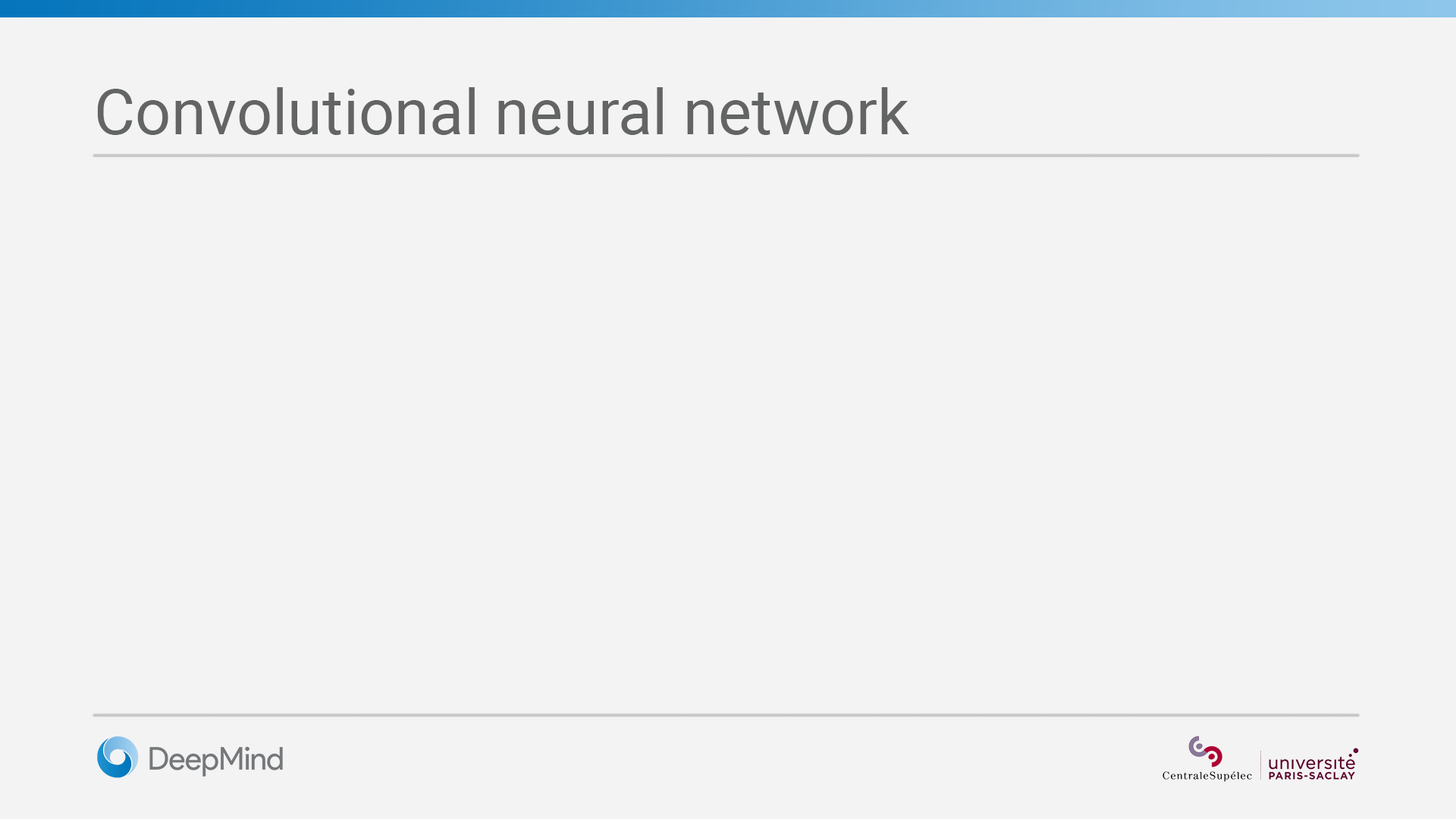
<style>
.page{position:relative;width:1456px;height:819px;background:#f3f3f3}
.page>*{position:absolute;margin:0}
.t1{font:63.2px "Roboto-Regular";color:#636464}
</style>
<div class="page">
<p class="t1" style="left:97px;top:87px;width:812px;height:48px">Convolutional neural network</p>
</div>
